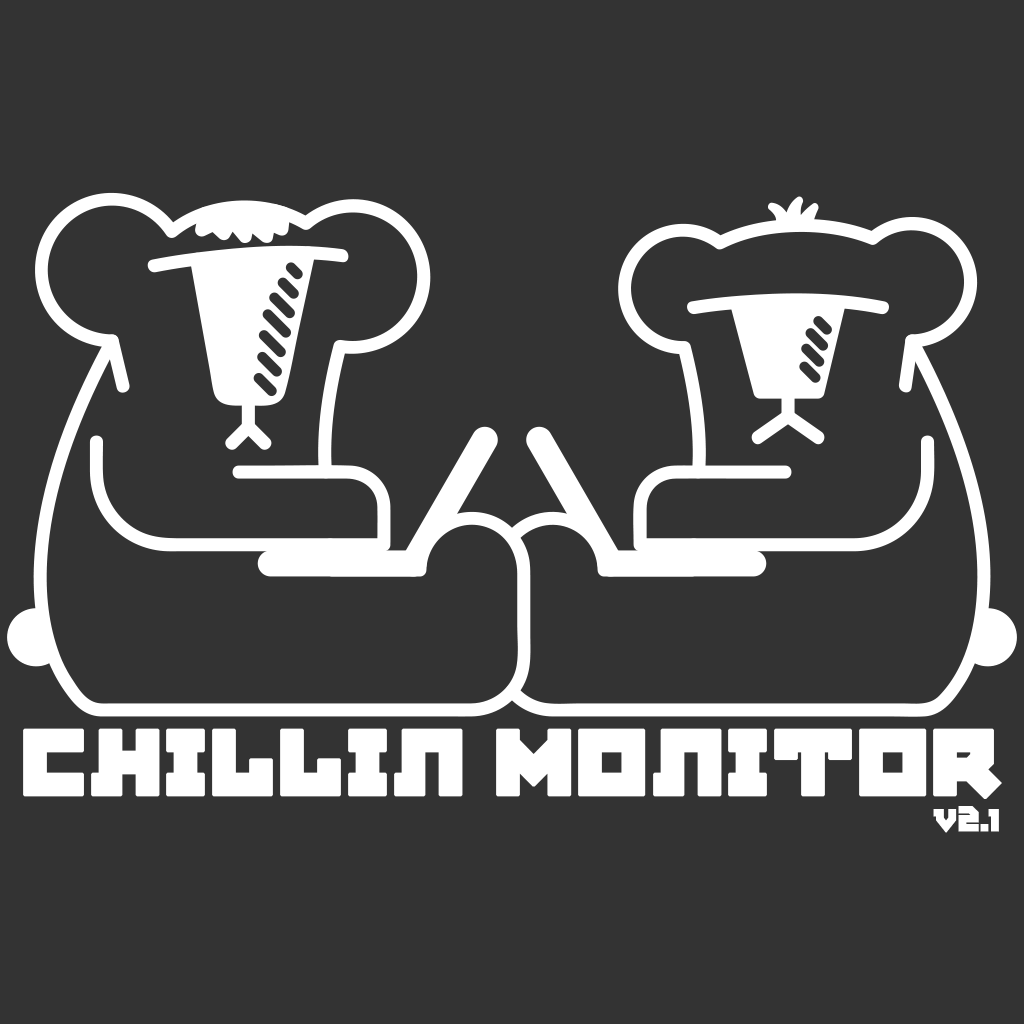
<style>
.page{position:relative;width:1024px;height:1024px;background:#333333}
.page>*{position:absolute;margin:0}
.t1{font:99.5px "AgitPropMedium";letter-spacing:-0.02em;color:#ffffff;font-weight:bold}
.t2{font:33.2px "AgitPropMedium";letter-spacing:-0.02em;color:#ffffff;font-weight:bold}
</style>
<div class="page">
<p class="t1" style="left:23px;top:728px;width:979px;height:71px">Chillin Monitor</p>
<p class="t2" style="left:933px;top:806px;width:66px;height:27px">v2.1</p>
</div>
